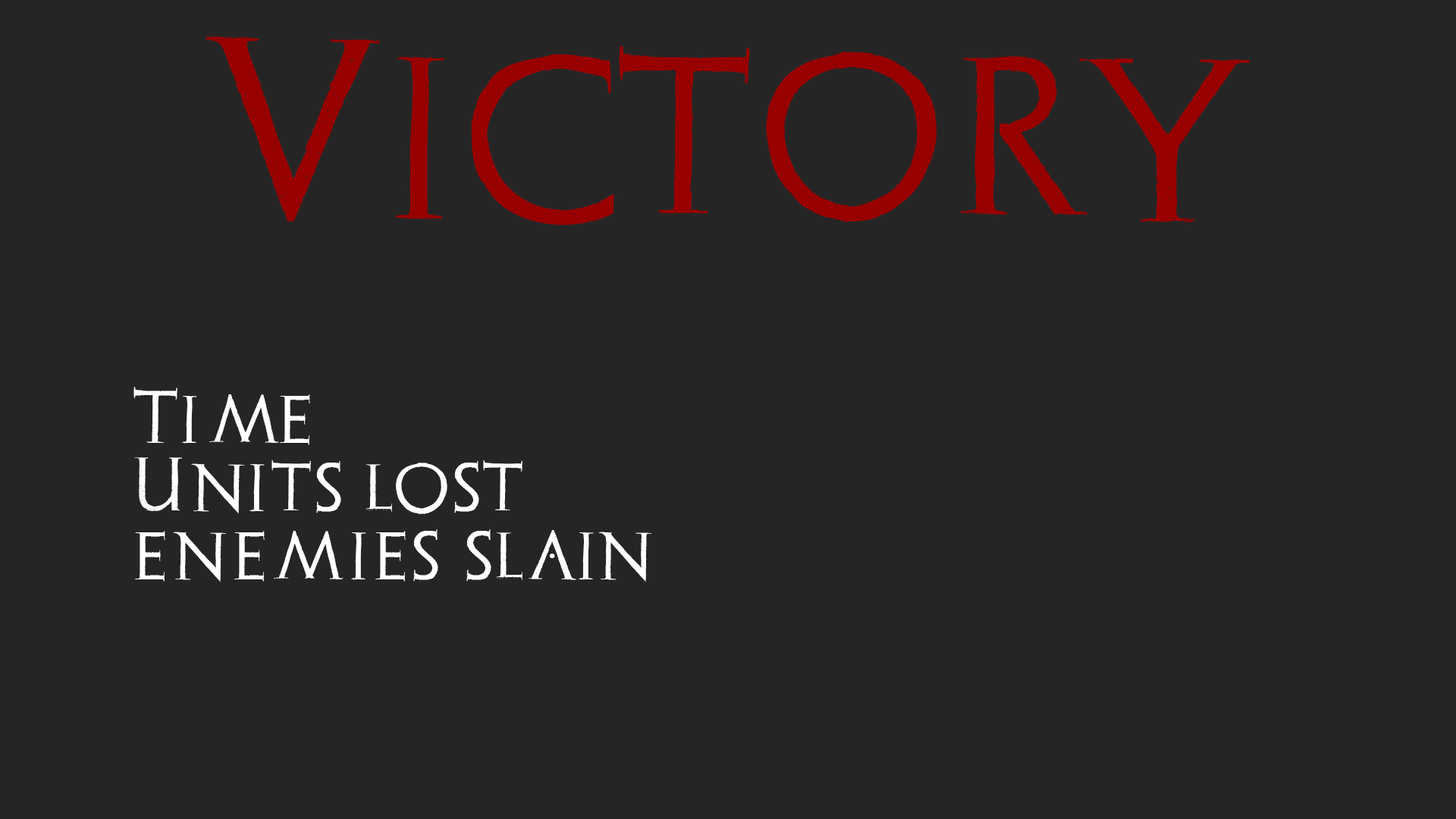
<style>
.page{position:relative;width:1456px;height:819px;background:#262525}
.page>*{position:absolute;margin:0}
.t1{font:189.6px "Archeologicaps";color:#980000}
.t2{font:56.9px "Archeologicaps";color:#ffffff}
</style>
<div class="page">
<p class="t1" style="left:206px;top:36px;width:1044px;height:189px">Victory</p>
<p class="t2" style="left:133px;top:387px;width:519px;height:195px">Time:;<br>Units lost<br>enemies slain</p>
</div>
